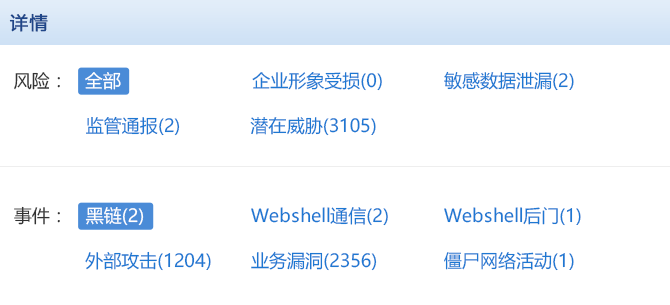
<style>
.page{position:relative;width:670px;height:305px;background:#ffffff}
.page>*{position:absolute;margin:0}
.t1{font:18px "MicrosoftYaHei";color:#1f4689;font-weight:bold}
.t2{font:18px "MicrosoftYaHei";color:#333333}
.t3{font:18px "MicrosoftYaHei";color:#ffffff}
.t4{font:18px "MicrosoftYaHei";color:#1e78d2}
</style>
<div class="page">
<p class="t1" style="left:9px;top:13px;width:39px;height:19px">详情</p>
<p class="t2" style="left:14px;top:72px;width:46px;height:18px">风险：</p>
<p class="t3" style="left:85px;top:72px;width:36px;height:18px">全部</p>
<p class="t4" style="left:252px;top:72px;width:130px;height:19px">企业形象受损(0)</p>
<p class="t4" style="left:444px;top:71px;width:130px;height:20px">敏感数据泄漏(2)</p>
<p class="t4" style="left:86px;top:116px;width:94px;height:20px">监管通报(2)</p>
<p class="t4" style="left:250px;top:117px;width:126px;height:19px">潜在威胁(3105)</p>
<p class="t2" style="left:14px;top:206px;width:46px;height:19px">事件：</p>
<p class="t3" style="left:85px;top:207px;width:59px;height:19px">黑链(2)</p>
<p class="t4" style="left:251px;top:207px;width:137px;height:19px">Webshell通信(2)</p>
<p class="t4" style="left:444px;top:207px;width:137px;height:19px">Webshell后门(1)</p>
<p class="t4" style="left:85px;top:251px;width:126px;height:20px">外部攻击(1204)</p>
<p class="t4" style="left:251px;top:251px;width:126px;height:20px">业务漏洞(2356)</p>
<p class="t4" style="left:444px;top:251px;width:130px;height:20px">僵尸网络活动(1)</p>
</div>
